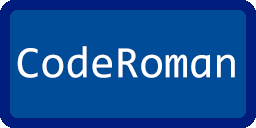
<style>
.page{position:relative;width:256px;height:128px;background:#004c98}
.page>*{position:absolute;margin:0}
.t1{font:45px "CodeNewRoman";color:#ffffff}
</style>
<div class="page">
<p class="t1" style="left:17px;top:46px;width:218px;height:32px">CodeRoman</p>
</div>
